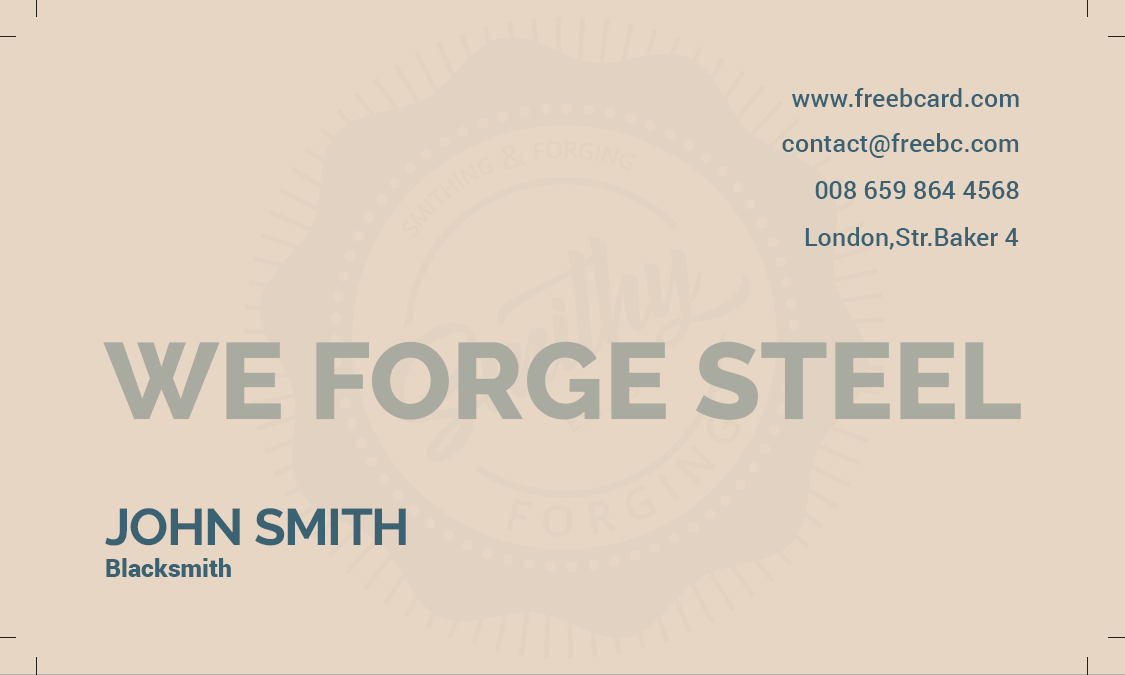
<style>
.page{position:relative;width:1125px;height:675px;background:#e8d6c4}
.page>*{position:absolute;margin:0}
.t1{font:25px "Roboto-Medium";color:#3a6273}
.t2{font:107.5px "Raleway-ExtraBold";color:#a9aba1}
.t3{font:51.6px "Raleway-Bold";letter-spacing:-0.025em;color:#3a6273;text-transform:uppercase}
.t4{font:25px "Roboto-Black";color:#3a6273}
</style>
<div class="page">
<p class="t1" style="left:792px;top:88px;width:227px;height:19px">www.freebcard.com</p>
<p class="t1" style="left:782px;top:133px;width:237px;height:25px">contact@freebc.com</p>
<p class="t1" style="left:815px;top:181px;width:204px;height:18px">008 659 864 4568</p>
<p class="t1" style="left:805px;top:227px;width:214px;height:23px">London,Str.Baker 4</p>
<p class="t2" style="left:103px;top:341px;width:918px;height:79px">WE FORGE STEEL</p>
<p class="t3" style="left:105px;top:508px;width:301px;height:38px">John Smith</p>
<p class="t4" style="left:106px;top:558px;width:125px;height:19px">Blacksmith</p>
</div>
